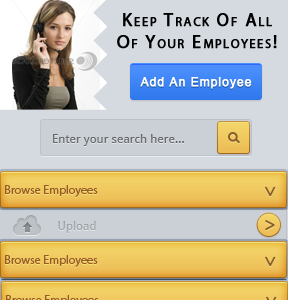
<style>
.page{position:relative;width:288px;height:300px;background:#d5dae0}
.page>*{position:absolute;margin:0}
.t1{font:18px "MyriadPro-Regular";letter-spacing:0.1em;color:#000101;font-variant:small-caps;font-weight:bold}
.t2{font:12px "ArialMT";letter-spacing:0.06em;color:#fefefe;font-weight:bold}
.t3{font:12px "DroidSans";color:#6a6e71}
.t4{font:12px "MyriadPro-Regular";color:#975c25}
.t5{font:18px "MyriadPro-Regular";color:#885c2d;font-variant:small-caps;font-weight:bold}
.t6{font:12px "DroidSans";color:#a1a6ac}
</style>
<div class="page">
<p class="t1" style="left:117px;top:13px;width:160px;height:36px;text-align:center">Keep Track Of All<br>Of Your Employees!</p>
<p class="t2" style="left:140px;top:77px;width:112px;height:12px">Add An Employee</p>
<p class="t3" style="left:53px;top:134px;width:131px;height:12px">Enter your search here...</p>
<p class="t4" style="left:5px;top:185px;width:93px;height:12px">Browse Employees</p>
<p class="t5" style="left:265px;top:186px;width:11px;height:10px;rotate:90deg">&gt;</p>
<p class="t6" style="left:58px;top:221px;width:38px;height:12px">Upload</p>
<p class="t5" style="left:265px;top:220px;width:10px;height:11px">&gt;</p>
<p class="t4" style="left:5px;top:255px;width:93px;height:12px">Browse Employees</p>
<p class="t5" style="left:265px;top:256px;width:11px;height:10px;rotate:90deg">&gt;</p>
</div>
